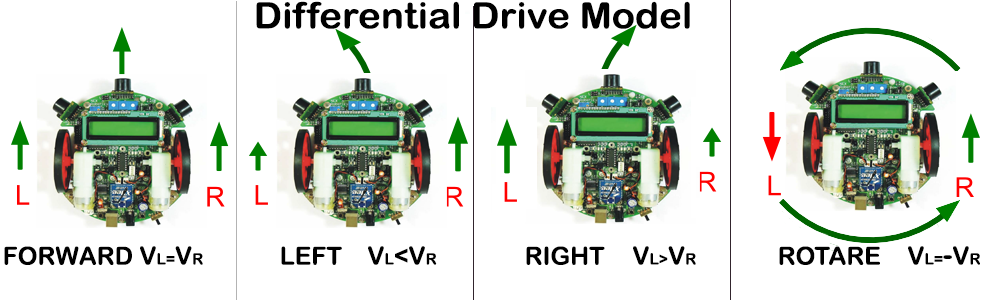
<style>
.page{position:relative;width:1000px;height:300px;background:#ffffff}
.page>*{position:absolute;margin:0}
.t1{font:36.2px "ArialRoundedMTBold";color:#000000;scale:1.06 1}
.t2{font:24.9px "ArialRoundedMTBold";color:#000000}
.t3{font:15.6px "ArialRoundedMTBold";color:#000000}
.t4{font:28px "ArialRoundedMTBold";color:#000000}
</style>
<div class="page">
<p class="t1" style="left:256px;top:1px;width:434px;height:28px">Differential Drive Model</p>
<p class="t2" style="left:4px;top:246px;width:128px;height:19px">FORWARD</p>
<p class="t3" style="left:140px;top:246px;width:63px;height:19px"><span class="t2"> V</span>L=<span class="t2">V</span>R</p>
<p class="t2" style="left:281px;top:246px;width:61px;height:19px">LEFT</p>
<p class="t2" style="left:368px;top:246px;width:69px;height:19px">V<span class="t3">L</span>&lt;V<span class="t3">R</span></p>
<p class="t2" style="left:526px;top:246px;width:79px;height:19px">RIGHT</p>
<p class="t3" style="left:633px;top:246px;width:63px;height:19px"><span class="t2"> V</span>L&gt;<span class="t2">V</span>R</p>
<p class="t2" style="left:779px;top:246px;width:101px;height:19px">ROTARE</p>
<p class="t3" style="left:908px;top:246px;width:72px;height:19px"><span class="t2"> V</span>L=<span class="t4">-</span><span class="t2">V</span>R</p>
</div>
